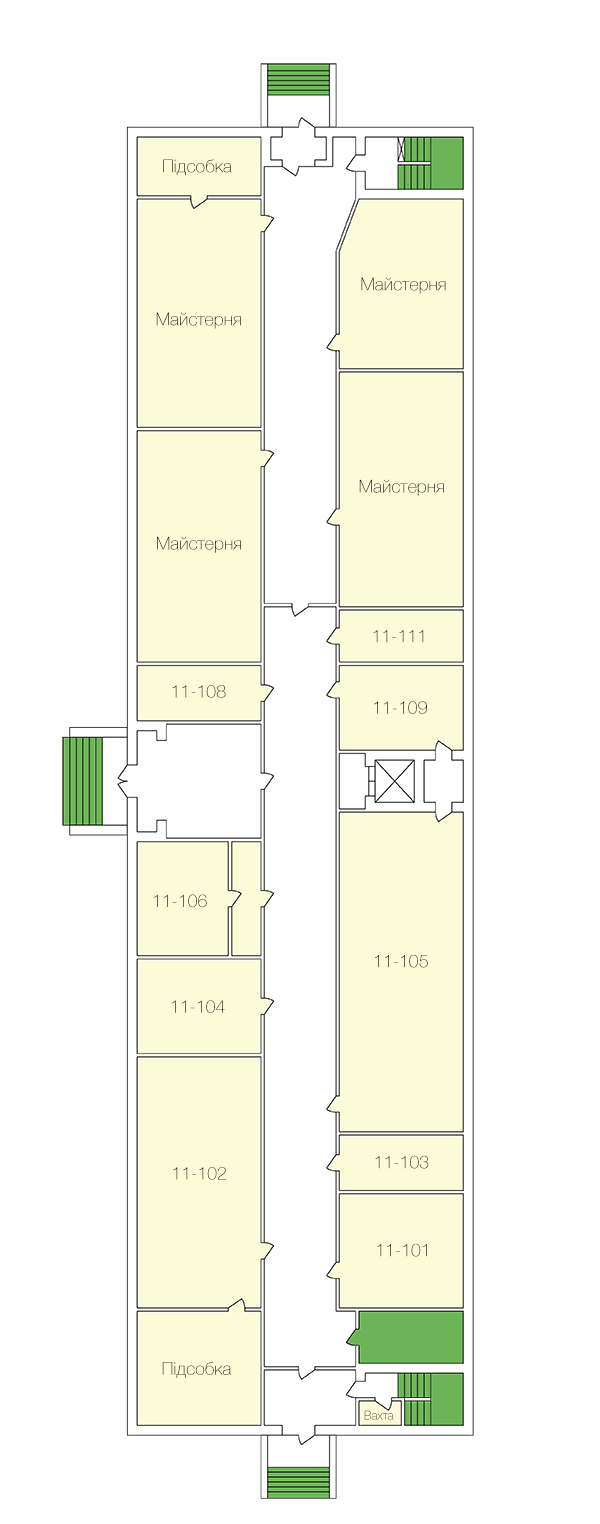
<style>
.page{position:relative;width:600px;height:1524px;background:#ffffff}
.page>*{position:absolute;margin:0}
.t1{font:17.8px "HelveticaNeueCyr-Thin"}
.t2{font:17.8px "HelveticaNeueCyr-Thin";color:#000000}
.t3{font:11.8px "HelveticaNeueCyr-Thin"}
</style>
<div class="page">
<p class="t1" style="left:163px;top:159px;width:69px;height:17px">Підсобка</p>
<p class="t1" style="left:361px;top:277px;width:85px;height:17px">Майстерня</p>
<p class="t2" style="left:156px;top:312px;width:85px;height:17px">Майстерня</p>
<p class="t2" style="left:359px;top:479px;width:85px;height:17px">Майстерня</p>
<p class="t2" style="left:157px;top:536px;width:84px;height:17px">Майстерня</p>
<p class="t1" style="left:373px;top:630px;width:51px;height:13px">11-111</p>
<p class="t1" style="left:172px;top:685px;width:54px;height:13px">11-108</p>
<p class="t2" style="left:374px;top:701px;width:53px;height:13px">11-109</p>
<p class="t1" style="left:153px;top:894px;width:54px;height:14px">11-106</p>
<p class="t1" style="left:375px;top:954px;width:53px;height:14px">11-105</p>
<p class="t1" style="left:171px;top:1000px;width:54px;height:13px">11-104</p>
<p class="t1" style="left:375px;top:1155px;width:54px;height:14px">11-103</p>
<p class="t1" style="left:173px;top:1167px;width:53px;height:13px">11-102</p>
<p class="t1" style="left:377px;top:1243px;width:50px;height:14px">11-101</p>
<p class="t1" style="left:162px;top:1361px;width:70px;height:17px">Підсобка</p>
<p class="t3" style="left:364px;top:1410px;width:30px;height:10px">Вахта</p>
</div>
